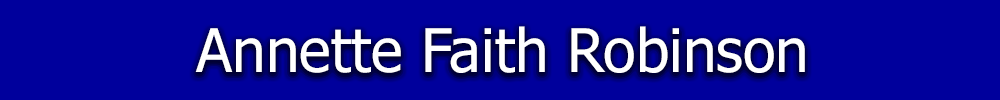
<style>
.page{position:relative;width:1000px;height:100px;background:#00009c}
.page>*{position:absolute;margin:0}
.t1{font:60px "Tahoma";color:#ffffff}
</style>
<div class="page">
<p class="t1" style="left:195px;top:26px;width:610px;height:47px">Annette Faith Robinson</p>
</div>
